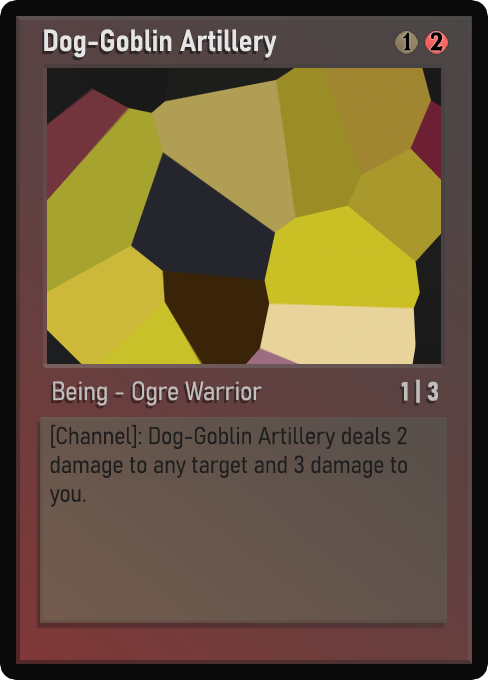
<style>
.page{position:relative;width:488px;height:680px}
.page>*{position:absolute;margin:0}
.t1{font:30px "Bahnschrift-SemiBoldSemiCondensed";color:#f2f2f2;font-weight:bold}
.t2{font:25px "WTRRoycroft";color:#000000;font-weight:bold;scale:1.09 1}
.t3{font:26px "Bahnschrift-LightSemiCondensed";color:#c8c8c8;font-weight:bold}
.t4{font:26px "Bahnschrift-BoldSemiCondensed";color:#c1bdbd;font-weight:bold}
.t5{font:24px "Bahnschrift-LightSemiCondensed";color:#1e1e1e;font-weight:bold}
</style>
<div class="page">
<p class="t1" style="left:44px;top:29px;width:233px;height:29px;opacity:0.9">Dog-Goblin Artillery</p>
<p class="t2" style="left:403px;top:32px;width:8px;height:19px">1</p>
<p class="t2" style="left:430px;top:32px;width:13px;height:19px">2</p>
<p class="t3" style="left:53px;top:381px;width:209px;height:25px;opacity:0.9">Being - Ogre Warrior</p>
<p class="t4" style="left:401px;top:379px;width:37px;height:24px">1 | 3</p>
<p class="t5" style="left:50px;top:424px;width:357px;height:83px">[Channel]: Dog-Goblin Artillery deals 2 damage to any target and 3 damage to you.</p>
</div>
